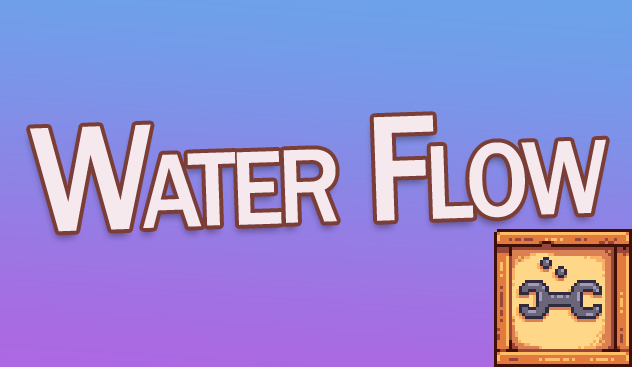
<style>
.page{position:relative;width:632px;height:367px}
.page>*{position:absolute;margin:0}
.t1{font:155px "FranklinGothic-Medium";letter-spacing:-0.04em;color:#f5e9ee;font-variant:small-caps;scale:0.9 1}
</style>
<div class="page">
<p class="t1" style="left:30px;top:115px;width:576px;height:117px;rotate:-2deg">Water Flow</p>
</div>
